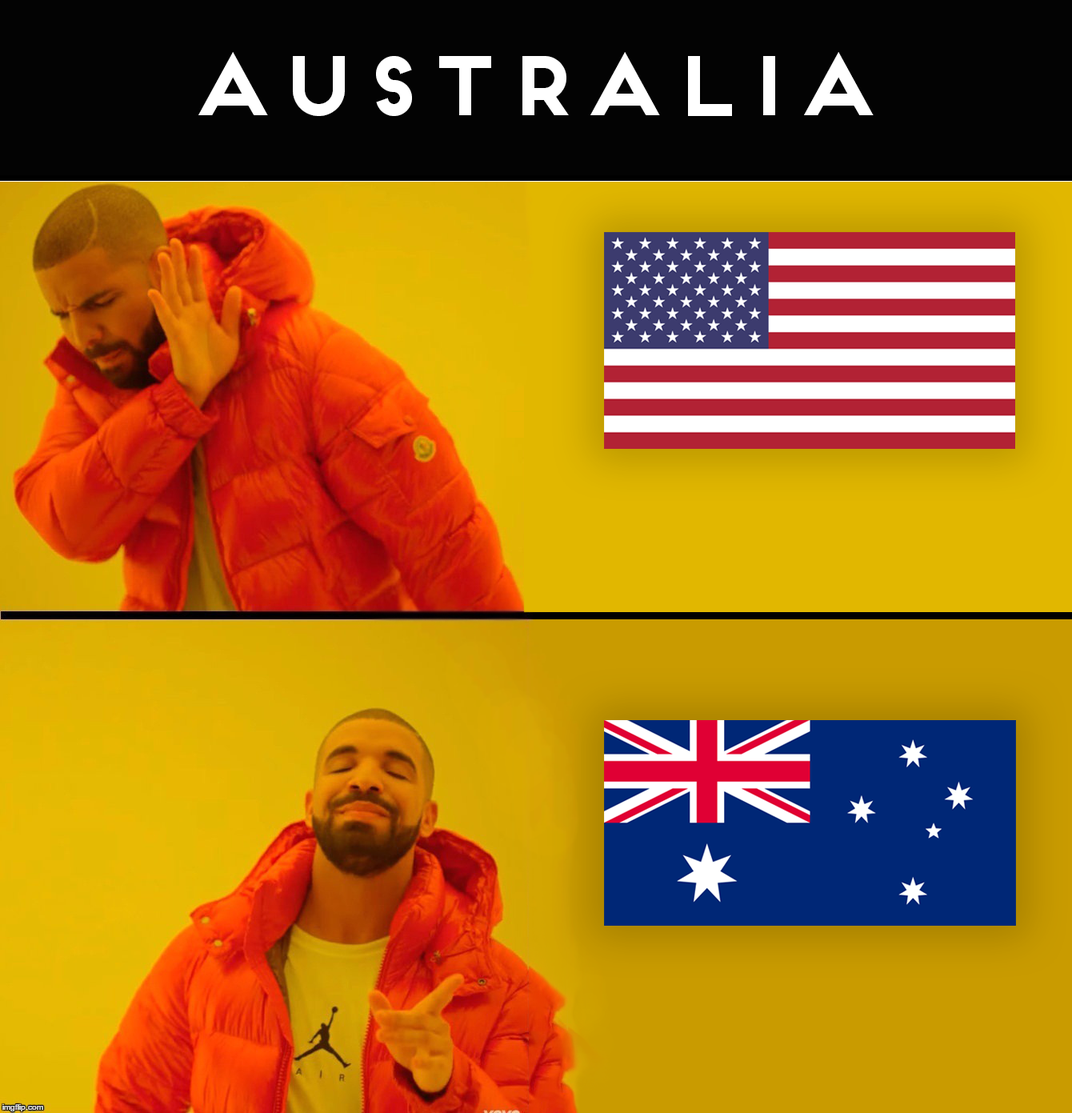
<style>
.page{position:relative;width:1072px;height:1113px}
.page>*{position:absolute;margin:0}
.t1{font:80px "Frontage-Bold";letter-spacing:0.025em;color:#ffffff}
</style>
<div class="page">
<p class="t1" style="left:198px;top:52px;width:675px;height:64px">AUSTRALIA</p>
</div>
